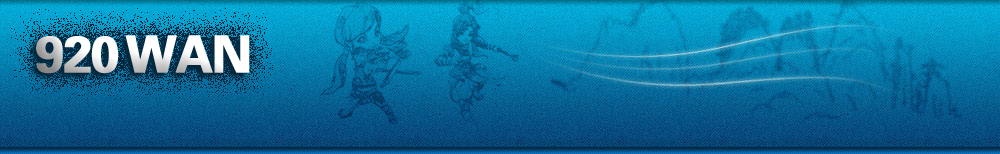
<style>
.page{position:relative;width:1000px;height:154px}
.page>*{position:absolute;margin:0}
.t1{font:51px "FZZYJW--GB1-0";letter-spacing:-0.04em;color:#ffffff;font-weight:bold}
.t2{font:51px "FZZYJW--GB1-0";letter-spacing:0.1em;color:#ffffff;font-weight:bold}
</style>
<div class="page">
<p class="t1" style="left:36px;top:35px;width:214px;height:39px">92<span class="t2">0</span>WAN</p>
</div>
